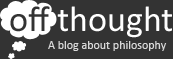
<style>
.page{position:relative;width:173px;height:59px;background:#333333}
.page>*{position:absolute;margin:0}
.t1{font:36px "Calibri";color:#ffffff}
.t2{font:12px "Calibri";color:#d8d8d8}
</style>
<div class="page">
<p class="t1" style="left:57px;top:6px;width:115px;height:32px">thought</p>
<p class="t2" style="left:48px;top:41px;width:119px;height:10px">A blog about philosophy</p>
</div>
